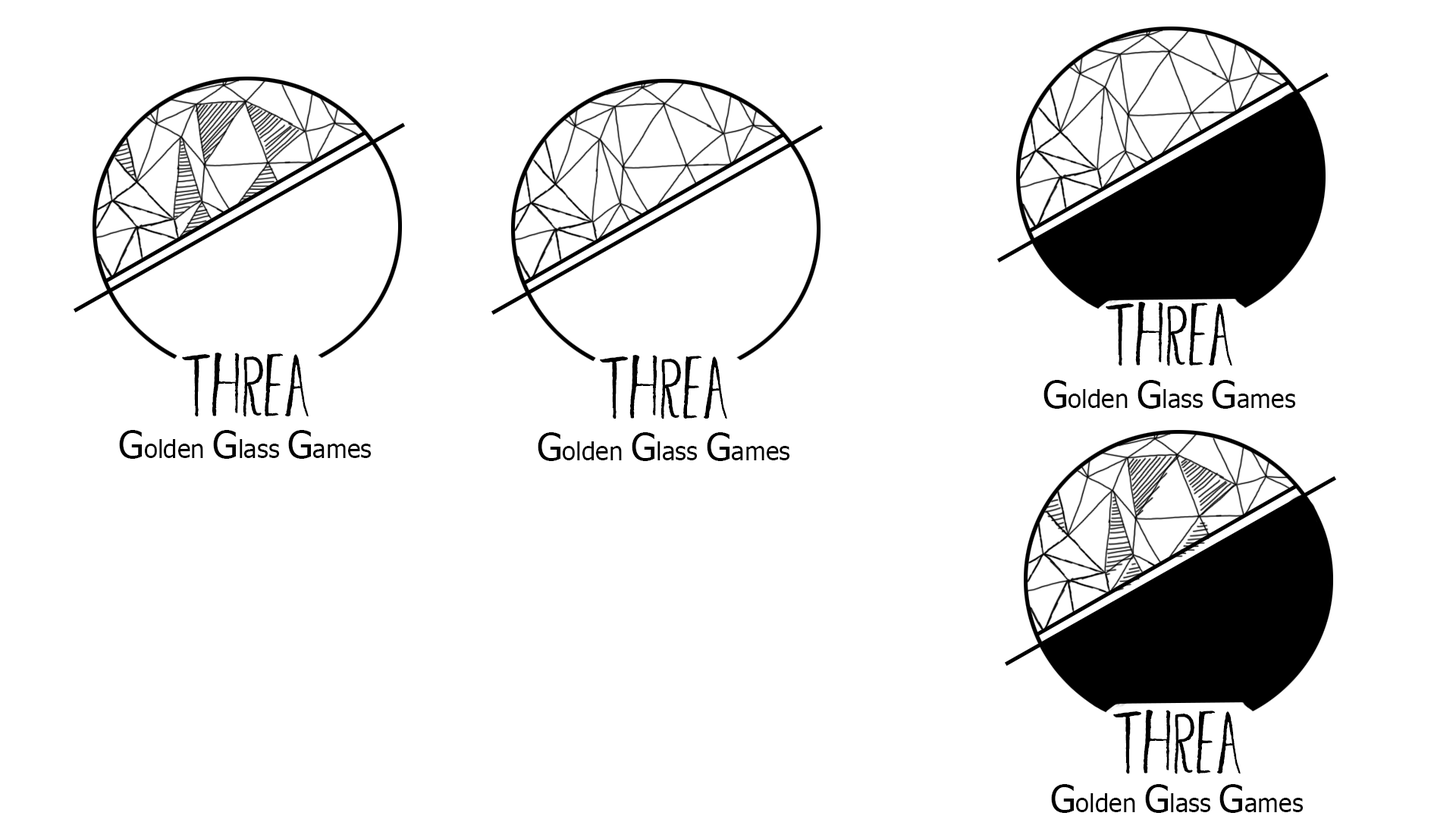
<style>
.page{position:relative;width:1456px;height:819px;background:#ffffff}
.page>*{position:absolute;margin:0}
.t1{font:75.8px "BambooBrisk-Regular";color:#000000}
.t2{font:25.3px "Tahoma";color:#000000}
.t3{font:37.9px "Tahoma";color:#000000}
</style>
<div class="page">
<p class="t1" style="left:1106px;top:302px;width:126px;height:64px">THREA</p>
<p class="t1" style="left:182px;top:353px;width:127px;height:64px">THREA</p>
<p class="t1" style="left:600px;top:355px;width:127px;height:64px">THREA</p>
<p class="t2" style="left:1043px;top:380px;width:252px;height:29px"><span class="t3">G</span>olden <span class="t3">G</span>lass <span class="t3">G</span>ames</p>
<p class="t2" style="left:119px;top:430px;width:252px;height:29px"><span class="t3">G</span>olden <span class="t3">G</span>lass <span class="t3">G</span>ames</p>
<p class="t2" style="left:538px;top:432px;width:251px;height:29px"><span class="t3">G</span>olden <span class="t3">G</span>lass <span class="t3">G</span>ames</p>
<p class="t1" style="left:1113px;top:710px;width:128px;height:64px">THREA</p>
<p class="t2" style="left:1051px;top:784px;width:252px;height:29px"><span class="t3">G</span>olden <span class="t3">G</span>lass <span class="t3">G</span>ames</p>
</div>
